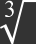
<style>
.page{position:relative;width:36px;height:44px;background:#333333}
.page>*{position:absolute;margin:0}
.t1{font:23.7px "TimesNewRomanPSMT";color:#ffffff}
</style>
<div class="page">
<p class="t1" style="left:5px;top:0px;width:9px;height:17px">3</p>
</div>
